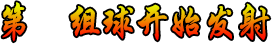
<style>
.page{position:relative;width:272px;height:44px;background:#ffffff}
.page>*{position:absolute;margin:0}
.t1{font:40px "STXingkai";letter-spacing:-0.08em;scale:0.93 1}
</style>
<div class="page">
<p class="t1" style="left:2px;top:2px;width:268px;height:40px">第      组球开始发射</p>
</div>
